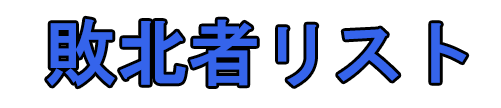
<style>
.page{position:relative;width:501px;height:108px;background:#ffffff}
.page>*{position:absolute;margin:0}
.t1{font:72px "HGGothicE";color:#3564eb}
</style>
<div class="page">
<p class="t1" style="left:47px;top:18px;width:420px;height:69px">敗北者リスト</p>
</div>
